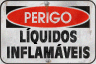
<style>
.page{position:relative;width:96px;height:64px}
.page>*{position:absolute;margin:0}
.t1{font:13.3px "OPTIAuvantGothic-DemiBold";letter-spacing:0.005em;color:#d6c8c6;scale:0.97 1}
.t2{font:15.6px "AntiqueOliveStd-Black";color:#242424;font-weight:bold;scale:0.75 1}
</style>
<div class="page">
<p class="t1" style="left:24px;top:11px;width:48px;height:13px">PERIGO</p>
<p class="t2" style="left:7px;top:28px;width:83px;height:31px;text-align:center">LÍQUIDOS<br>INFLAMÁVEIS</p>
</div>
